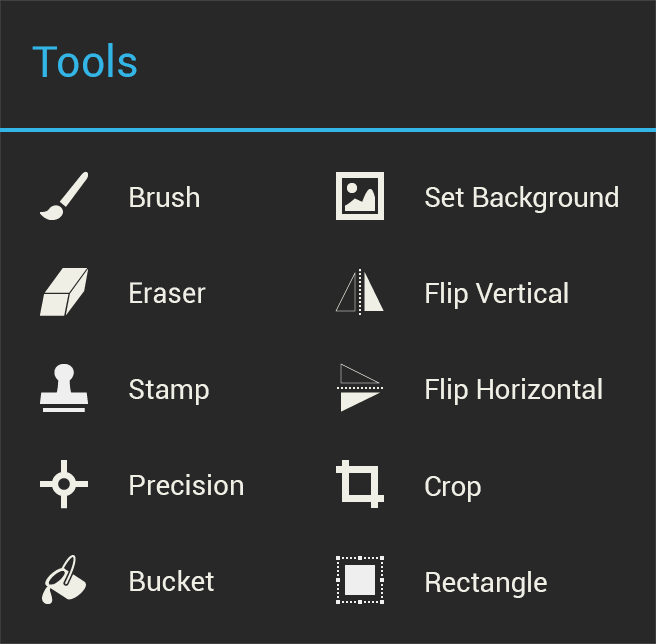
<style>
.page{position:relative;width:656px;height:644px;background:#282828}
.page>*{position:absolute;margin:0}
.t1{font:44.4px "Roboto-Regular";color:#33b5e5}
.t2{font:28.4px "Roboto-Regular";color:#f0efe6;scale:0.97 1}
.t3{font:28.4px "Roboto-Regular";color:#f0efe6;scale:0.96 1}
.t4{font:28.4px "Roboto-Regular";color:#f0efe6}
</style>
<div class="page">
<p class="t1" style="left:32px;top:43px;width:105px;height:34px">Tools</p>
<p class="t2" style="left:130px;top:186px;width:69px;height:21px">Brush</p>
<p class="t2" style="left:425px;top:186px;width:193px;height:27px">Set Background</p>
<p class="t3" style="left:130px;top:282px;width:76px;height:21px">Eraser</p>
<p class="t4" style="left:426px;top:282px;width:142px;height:27px">Flip Vertical</p>
<p class="t4" style="left:129px;top:379px;width:80px;height:26px">Stamp</p>
<p class="t2" style="left:426px;top:378px;width:176px;height:27px">Flip Horizontal</p>
<p class="t4" style="left:130px;top:474px;width:113px;height:21px">Precision</p>
<p class="t2" style="left:425px;top:476px;width:56px;height:26px">Crop</p>
<p class="t4" style="left:130px;top:570px;width:84px;height:21px">Bucket</p>
<p class="t2" style="left:426px;top:571px;width:121px;height:27px">Rectangle</p>
</div>
